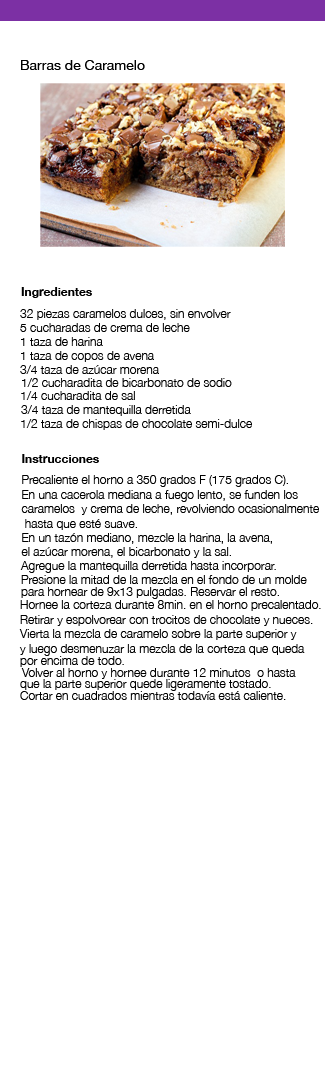
<style>
.page{position:relative;width:325px;height:1068px;background:#ffffff}
.page>*{position:absolute;margin:0}
.t1{font:14px "HelveticaNeue";color:#000000}
.t2{font:12px "HelveticaNeue-Bold";color:#000000}
.t3{font:12px "HelveticaNeue-Light";color:#000000}
</style>
<div class="page">
<p class="t1" style="left:21px;top:60px;width:124px;height:10px">Barras de Caramelo</p>
<p class="t2" style="left:21px;top:287px;width:71px;height:11px">Ingredientes</p>
<p class="t3" style="left:20px;top:309px;width:211px;height:11px">32 piezas caramelos dulces, sin envolver</p>
<p class="t3" style="left:20px;top:323px;width:170px;height:9px">5 cucharadas de crema de leche</p>
<p class="t3" style="left:21px;top:337px;width:82px;height:9px">1 taza de harina</p>
<p class="t3" style="left:21px;top:351px;width:133px;height:11px">1 taza de copos de avena</p>
<p class="t3" style="left:20px;top:365px;width:139px;height:9px">3/4 taza de azúcar morena</p>
<p class="t3" style="left:22px;top:378px;width:210px;height:9px">1/2 cucharadita de bicarbonato de sodio</p>
<p class="t3" style="left:21px;top:391px;width:114px;height:9px">1/4 cucharadita de sal</p>
<p class="t3" style="left:21px;top:405px;width:170px;height:11px">3/4 taza de mantequilla derretida</p>
<p class="t3" style="left:21px;top:419px;width:231px;height:11px">1/2 taza de chispas de chocolate semi-dulce</p>
<p class="t2" style="left:22px;top:454px;width:77px;height:9px">Instrucciones</p>
<p class="t3" style="left:22px;top:475px;width:266px;height:12px">Precaliente el horno a 350 grados F (175 grados C).</p>
<p class="t3" style="left:22px;top:490px;width:276px;height:12px">En una cacerola mediana a fuego lento, se funden los</p>
<p class="t3" style="left:21px;top:504px;width:298px;height:11px">caramelos  y crema de leche, revolviendo ocasionalmente</p>
<p class="t3" style="left:25px;top:519px;width:112px;height:11px">hasta que esté suave.</p>
<p class="t3" style="left:22px;top:533px;width:250px;height:11px">En un tazón mediano, mezcle la harina, la avena,</p>
<p class="t3" style="left:21px;top:547px;width:210px;height:11px">el azúcar morena, el bicarbonato y la sal.</p>
<p class="t3" style="left:20px;top:561px;width:256px;height:12px">Agregue la mantequilla derretida hasta incorporar.</p>
<p class="t3" style="left:21px;top:575px;width:286px;height:9px">Presione la mitad de la mezcla en el fondo de un molde</p>
<p class="t3" style="left:21px;top:587px;width:258px;height:12px">para hornear de 9x13 pulgadas. Reservar el resto.</p>
<p class="t3" style="left:20px;top:600px;width:301px;height:11px">Hornee la corteza durante 8min. en el horno precalentado.</p>
<p class="t3" style="left:20px;top:615px;width:293px;height:11px">Retirar y espolvorear con trocitos de chocolate y nueces.</p>
<p class="t3" style="left:19px;top:629px;width:278px;height:11px">Vierta la mezcla de caramelo sobre la parte superior y</p>
<p class="t3" style="left:19px;top:644px;width:286px;height:12px">y luego desmenuzar la mezcla de la corteza que queda</p>
<p class="t3" style="left:20px;top:656px;width:104px;height:11px">por encima de todo.</p>
<p class="t3" style="left:21px;top:668px;width:275px;height:11px">Volver al horno y hornee durante 12 minutos  o hasta</p>
<p class="t3" style="left:20px;top:679px;width:251px;height:12px">que la parte superior quede ligeramente tostado.</p>
<p class="t3" style="left:20px;top:691px;width:266px;height:9px">Cortar en cuadrados mientras todavía está caliente.</p>
</div>
